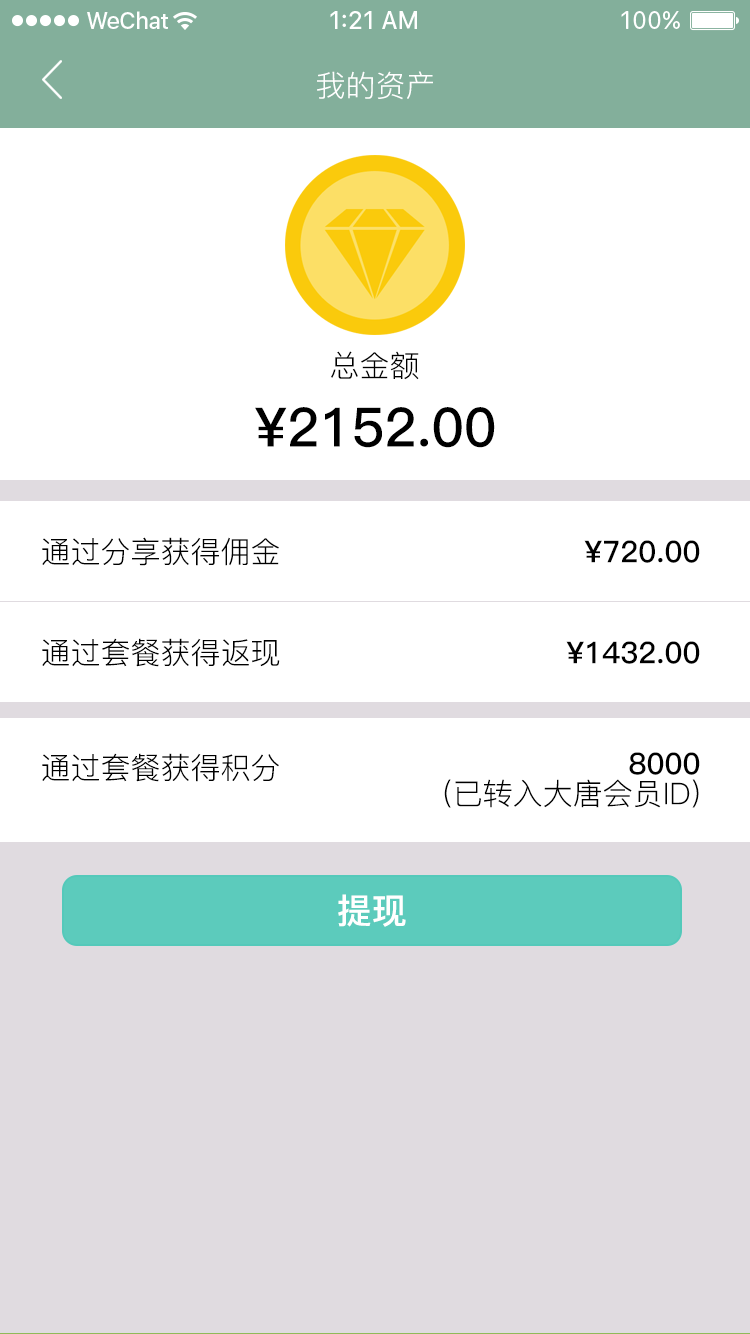
<style>
.page{position:relative;width:750px;height:1334px;background:#ffffff}
.page>*{position:absolute;margin:0}
.t1{font:30px "PingFang-SC-Regular";color:#ffffff;text-transform:uppercase}
.t2{font:30px "PingFang-SC-Regular";color:#000000;text-transform:uppercase}
.t3{font:54.1px "PingFang-SC-Bold";color:#000000;text-transform:uppercase}
.t4{font:30px "PingFang-SC-Bold";color:#000000;text-transform:uppercase}
.t5{font:30px/30px "PingFang-SC-Regular";color:#000000;text-transform:uppercase}
.t6{font:30px/30px "PingFang-SC-Bold";color:#000000;text-transform:uppercase}
.t7{font:35px "PingFang-SC-Bold";color:#ffffff;text-transform:uppercase}
</style>
<div class="page">
<p class="t1" style="left:317px;top:71px;width:116px;height:29px">我的资产</p>
<p class="t2" style="left:331px;top:351px;width:88px;height:29px">总金额</p>
<p class="t3" style="left:255px;top:407px;width:240px;height:41px">¥2152.00</p>
<p class="t2" style="left:42px;top:537px;width:237px;height:29px">通过分享获得佣金</p>
<p class="t4" style="left:584px;top:540px;width:116px;height:23px">¥720.00</p>
<p class="t2" style="left:42px;top:638px;width:238px;height:29px">通过套餐获得返现</p>
<p class="t4" style="left:566px;top:641px;width:134px;height:23px">¥1432.00</p>
<p class="t2" style="left:42px;top:753px;width:237px;height:29px">通过套餐获得积分</p>
<p class="t5" style="left:444px;top:752px;width:256px;height:56px;text-align:right"><span class="t6">8000<br></span>(已转入大唐会员ID)</p>
<p class="t7" style="left:338px;top:894px;width:68px;height:33px">提现</p>
</div>
